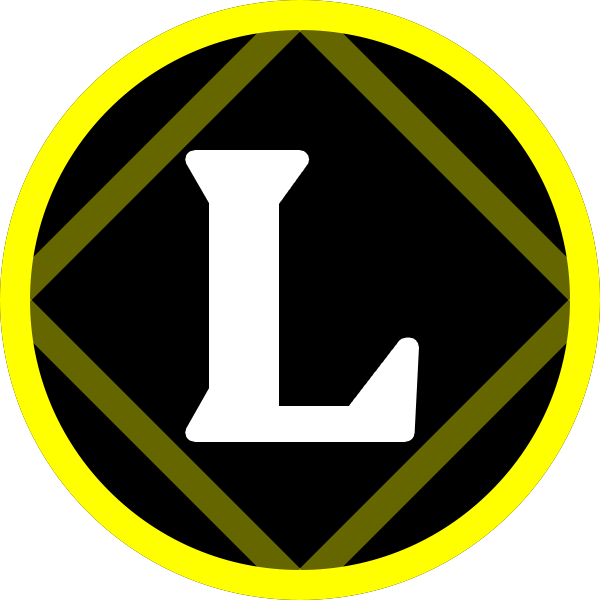
<style>
.page{position:relative;width:600px;height:600px;background:#000000}
.page>*{position:absolute;margin:0}
.t1{font:400px "BluuNext-Bold";color:#ffffff}
</style>
<div class="page">
<p class="t1" style="left:194px;top:159px;width:216px;height:274px">L</p>
</div>
